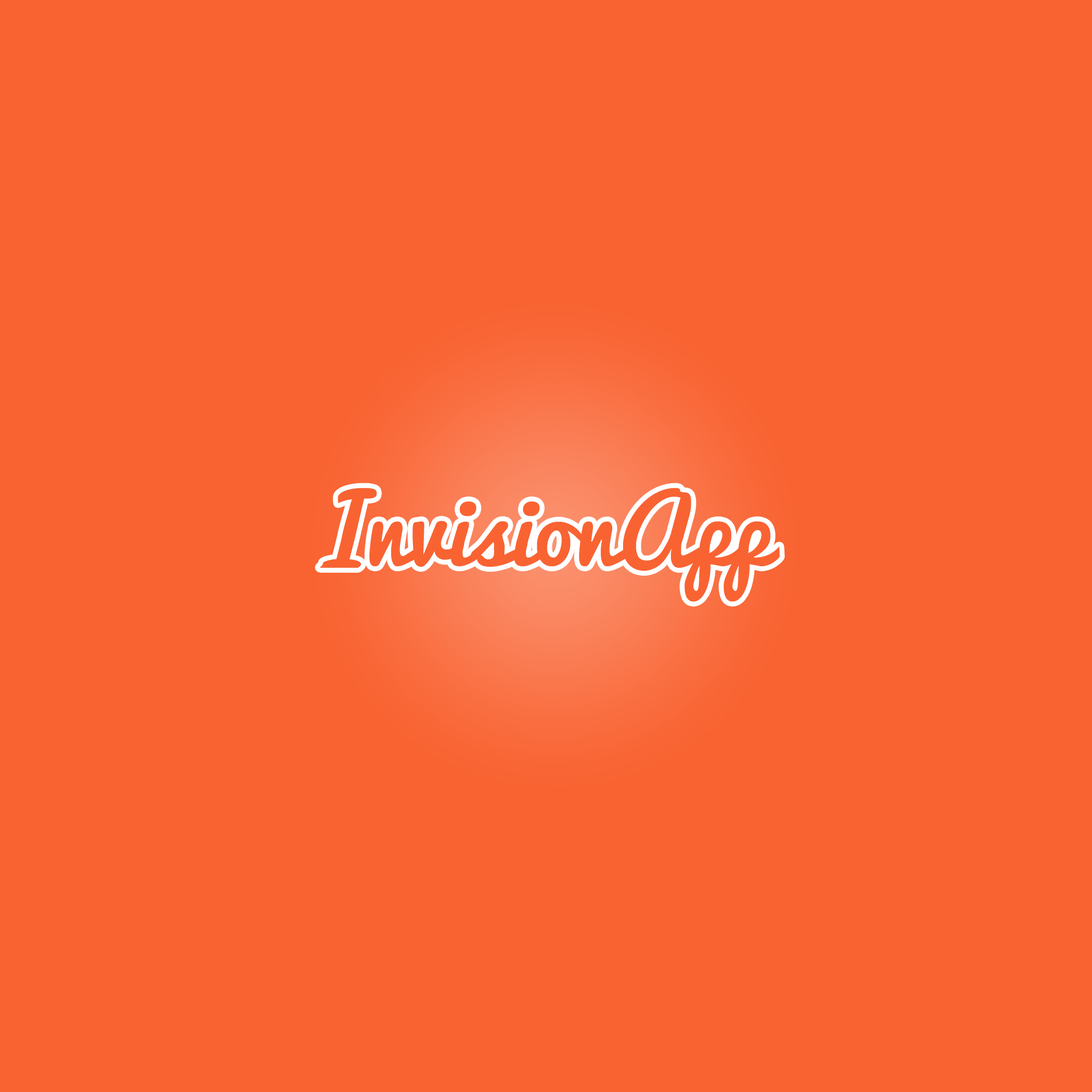
<style>
.page{position:relative;width:1092px;height:1092px;background:#f96332}
.page>*{position:absolute;margin:0}
.t1{font:92.7px "Pacifico";color:#f96332}
</style>
<div class="page">
<p class="t1" style="left:319px;top:488px;width:461px;height:114px">InvisionApp</p>
</div>
